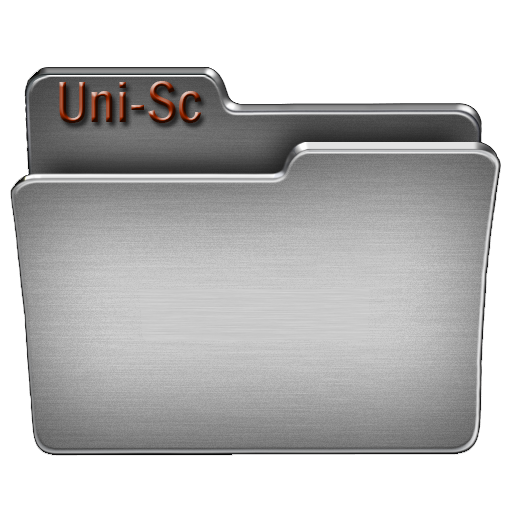
<style>
.page{position:relative;width:512px;height:512px;background:#ffffff}
.page>*{position:absolute;margin:0}
.t1{font:60px "FranklinGothic-MediumCond"}
</style>
<div class="page">
<p class="t1" style="left:59px;top:81px;width:143px;height:42px">Uni-Sc</p>
</div>
